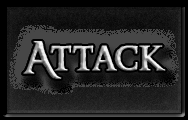
<style>
.page{position:relative;width:188px;height:120px}
.page>*{position:absolute;margin:0}
.t1{font:40px "RingbearerMedium";letter-spacing:0.01em;font-weight:bold}
</style>
<div class="page">
<p class="t1" style="left:23px;top:41px;width:143px;height:38px">Attack</p>
</div>
